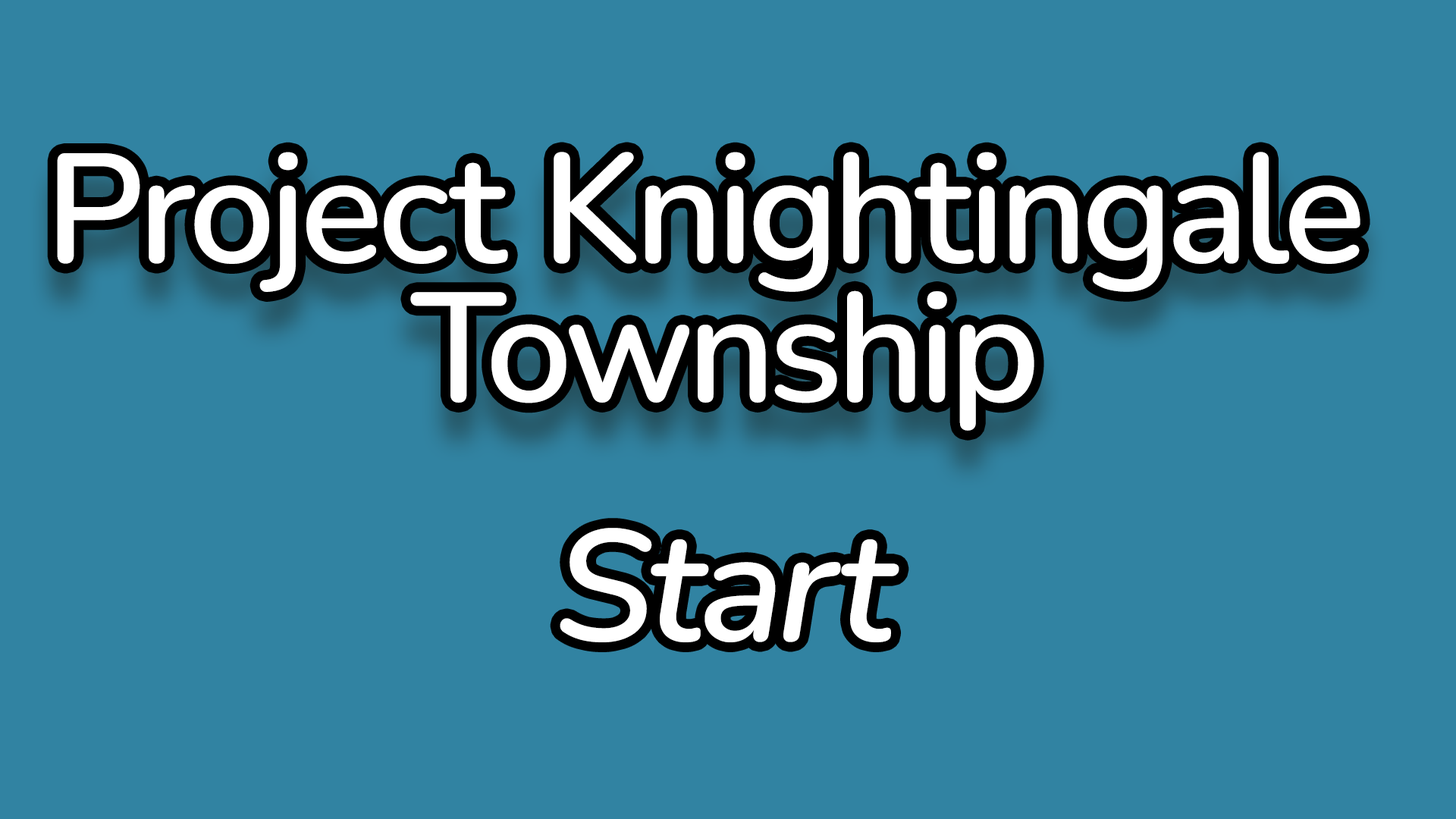
<style>
.page{position:relative;width:1456px;height:819px;background:#3183a2}
.page>*{position:absolute;margin:0}
.t1{font:154.8px/139px "Nunito-SemiBold";letter-spacing:-0.02em;color:#ffffff}
.t2{font:158px "Nunito-SemiBoldItalic";letter-spacing:-0.02em;color:#ffffff}
</style>
<div class="page">
<p class="t1" style="left:57px;top:152px;width:1303px;height:279px;text-align:center">Project Knightingale <br>Township</p>
<p class="t2" style="left:560px;top:528px;width:339px;height:114px">Start</p>
</div>
